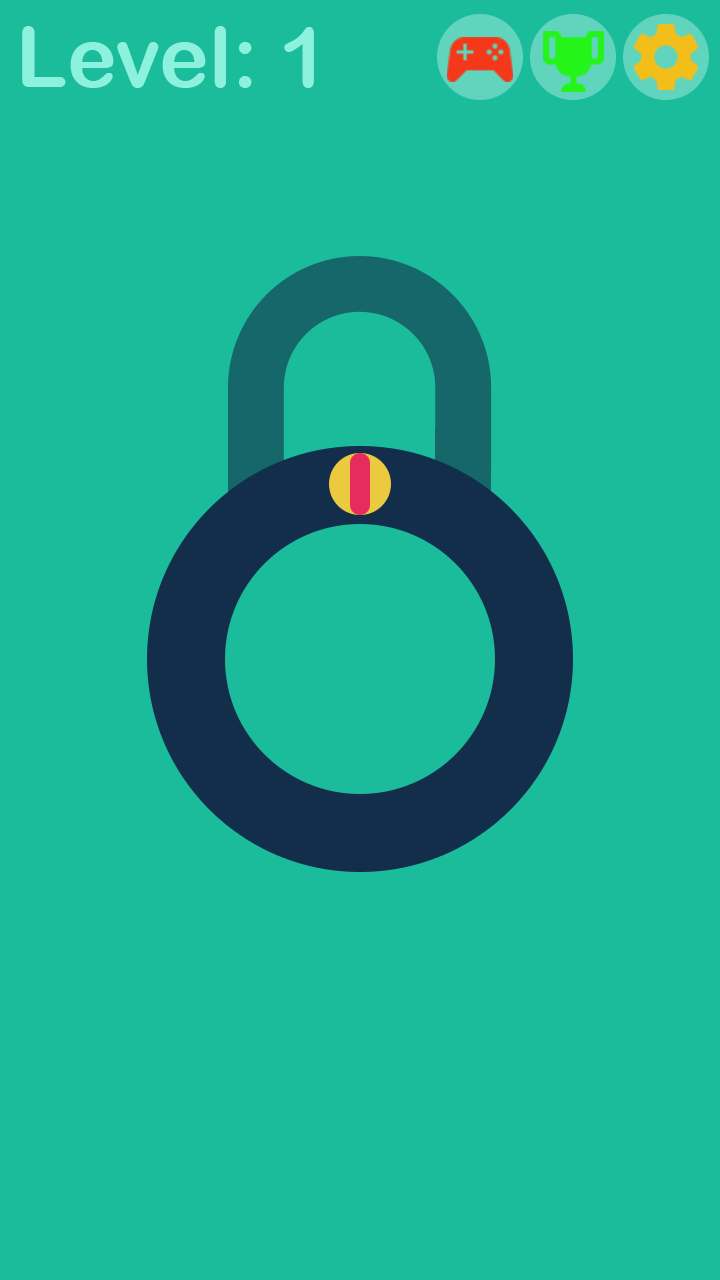
<style>
.page{position:relative;width:720px;height:1280px;background:#1bbc9b}
.page>*{position:absolute;margin:0}
.t1{font:84px "ArialRoundedMTBold";color:#8df2dd}
</style>
<div class="page">
<p class="t1" style="left:22px;top:26px;width:292px;height:62px">Level: 1</p>
</div>
